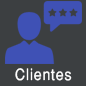
<style>
.page{position:relative;width:86px;height:86px;background:#3c3f41}
.page>*{position:absolute;margin:0}
.t1{font:15.6px "Helvetica-Normal";letter-spacing:0.06em;color:#ffffff;scale:0.89 1}
</style>
<div class="page">
<p class="t1" style="left:15px;top:68px;width:57px;height:13px">Clientes</p>
</div>
